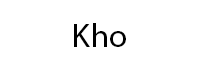
<style>
.page{position:relative;width:200px;height:70px;background:#ffffff}
.page>*{position:absolute;margin:0}
.t1{font:32.9px "MyriadPro-Regular";color:#000000}
</style>
<div class="page">
<p class="t1" style="left:74px;top:23px;width:52px;height:24px">Kho</p>
</div>
